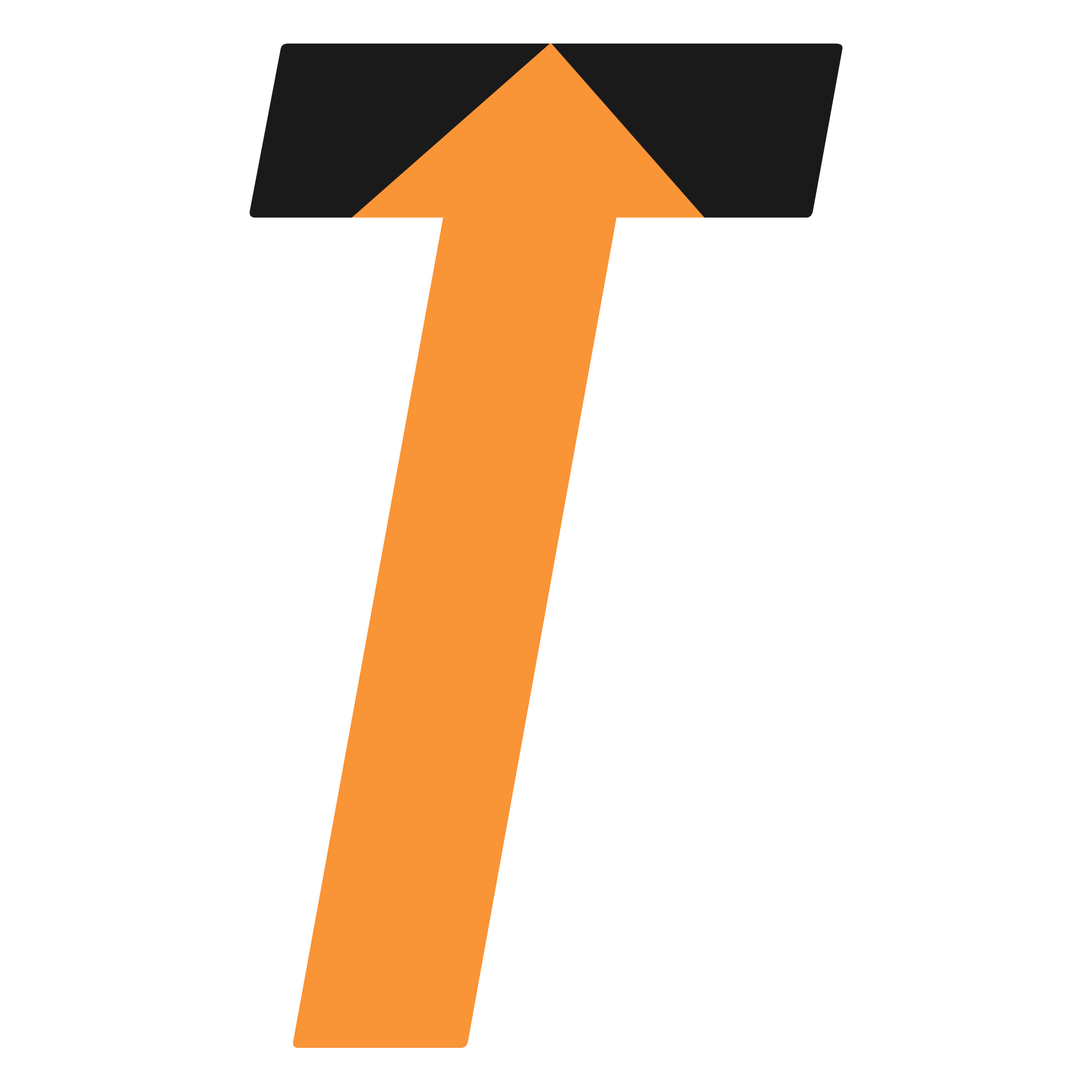
<style>
.page{position:relative;width:1092px;height:1092px;background:#ffffff}
.page>*{position:absolute;margin:0}
.t1{font:1443.5px "Bayon-Regular";color:#f99437;font-style:italic}
</style>
<div class="page">
<p class="t1" style="left:248px;top:43px;width:596px;height:1005px">T</p>
</div>
